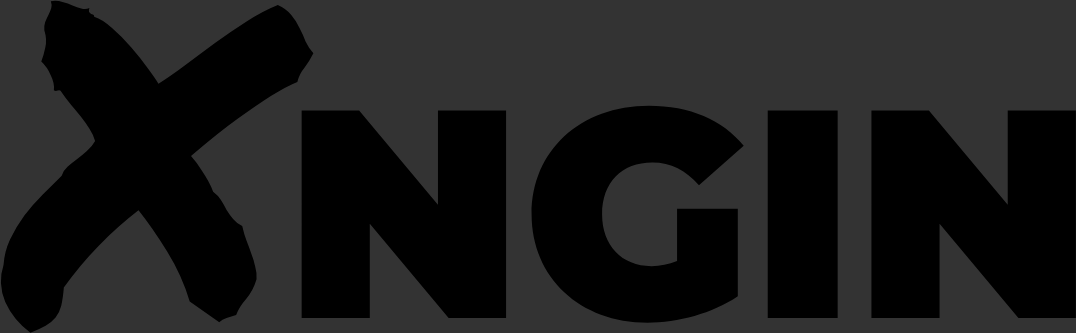
<style>
.page{position:relative;width:1076px;height:333px;background:#333333}
.page>*{position:absolute;margin:0}
.t1{font:296.3px "Montserrat-Black";color:#000000}
.t2{font:444.4px "PermanentMarker-Regular";color:#000000}
</style>
<div class="page">
<p class="t1" style="left:0px;top:0px;width:1076px;height:333px"><span class="t2">X</span>NGIN</p>
</div>
